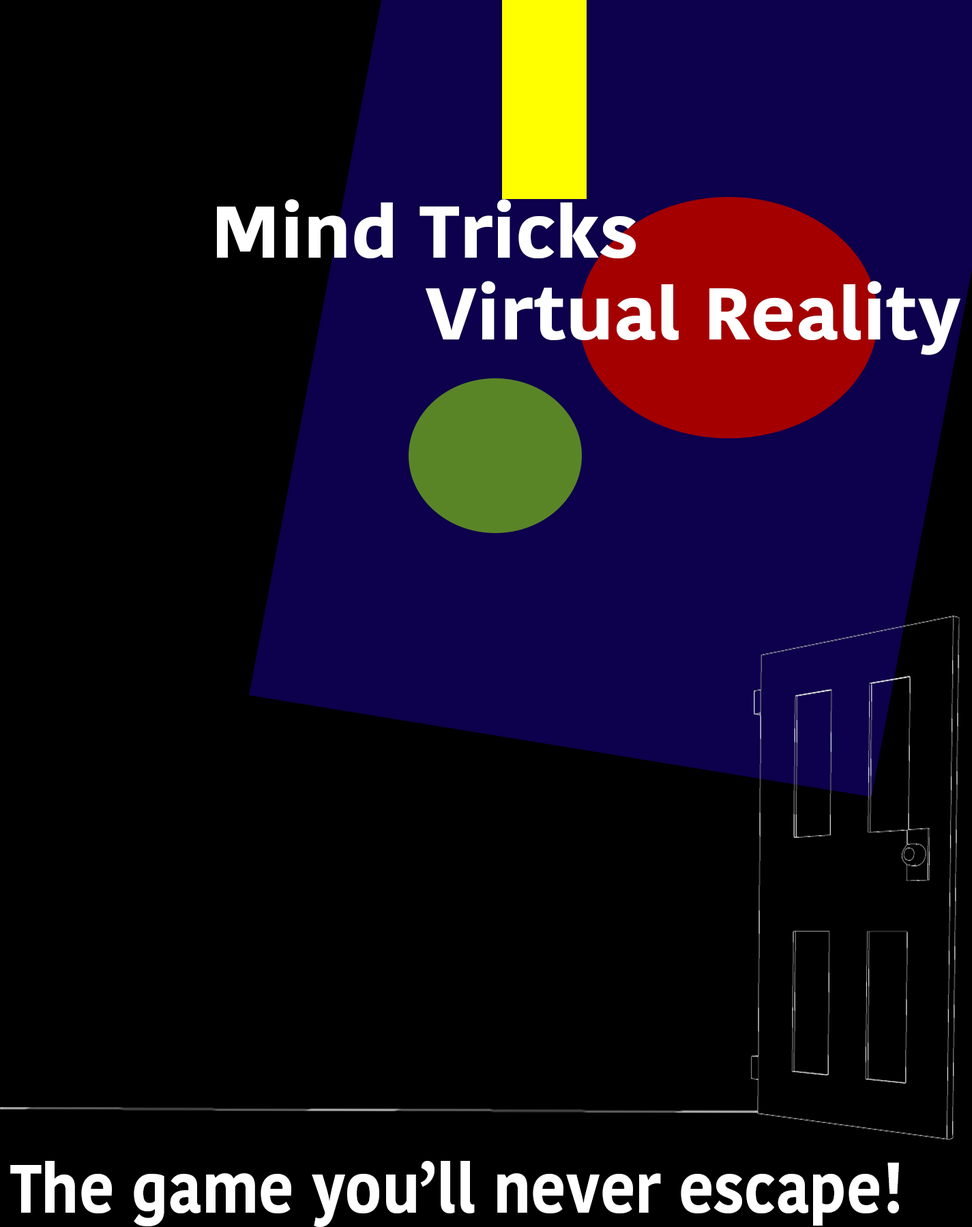
<style>
.page{position:relative;width:972px;height:1227px;background:#000000}
.page>*{position:absolute;margin:0}
.t1{font:72.5px "KohinoorDevanagari-Bold";color:#ffffff;scale:1.08 1}
.t2{font:68.2px "KohinoorDevanagari-Bold";color:#ffffff;scale:0.91 1}
</style>
<div class="page">
<p class="t1" style="left:217px;top:199px;width:418px;height:60px">Mind Tricks</p>
<p class="t1" style="left:425px;top:281px;width:535px;height:74px">Virtual Reality</p>
<p class="t2" style="left:10px;top:1161px;width:889px;height:66px">The game you’ll never escape!</p>
</div>
